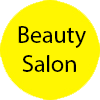
<style>
.page{position:relative;width:100px;height:100px;background:#fff601}
.page>*{position:absolute;margin:0}
.t1{font:24px "MyriadPro-Regular";color:#000000}
</style>
<div class="page">
<p class="t1" style="left:18px;top:26px;width:68px;height:46px">Beauty<br> Salon</p>
</div>
